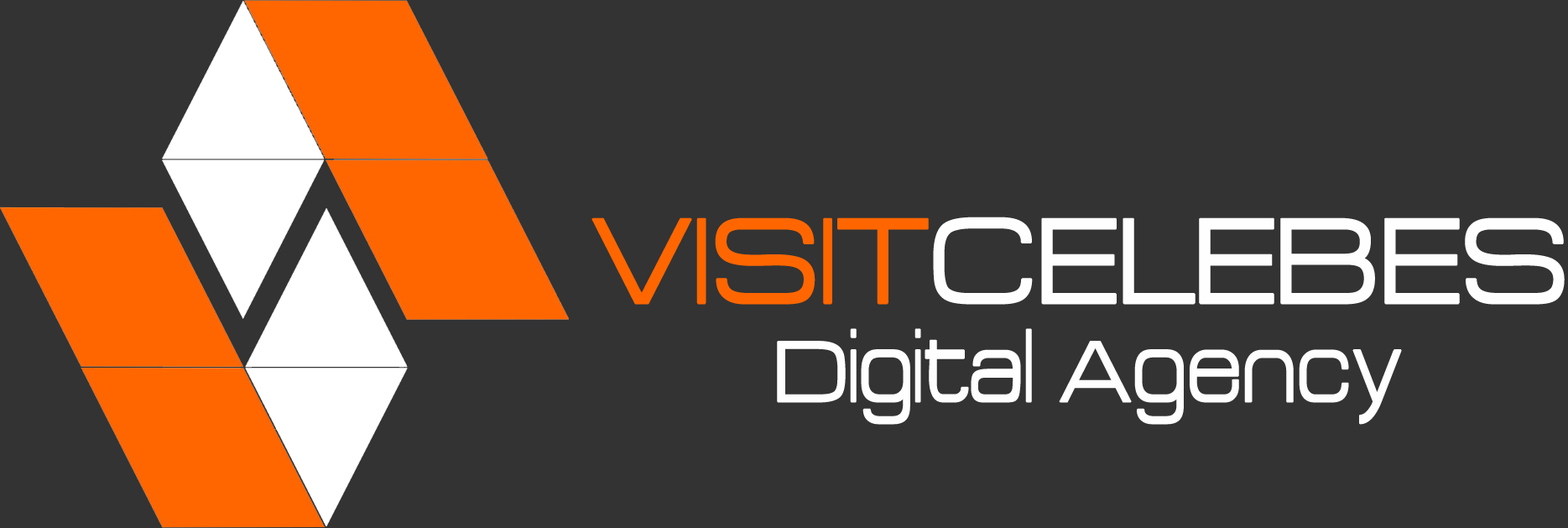
<style>
.page{position:relative;width:1568px;height:528px;background:#333333}
.page>*{position:absolute;margin:0}
.t1{font:135.8px "Acens";color:#fefefe}
.t2{font:135.8px "Acens";color:#ff6600}
.t3{font:97px "Acens";color:#fefefe}
</style>
<div class="page">
<p class="t1" style="left:591px;top:216px;width:974px;height:89px"><span class="t2">VISIT</span>CELEBES</p>
<p class="t3" style="left:777px;top:328px;width:625px;height:97px">Digital Agency</p>
</div>
